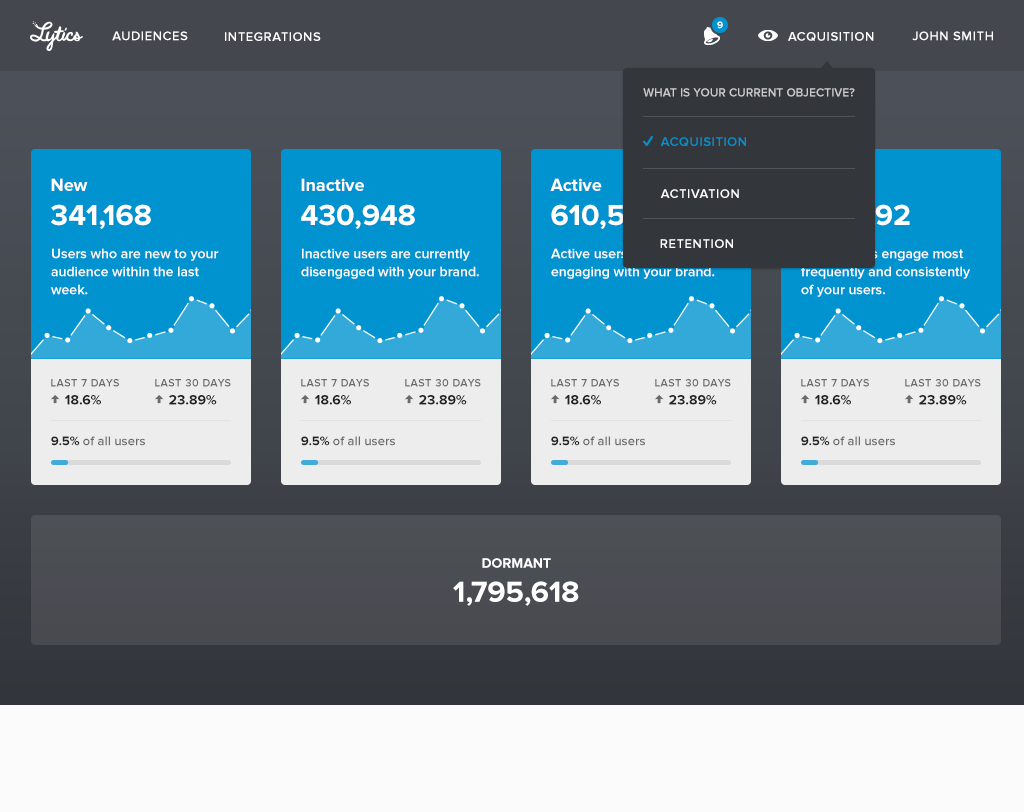
<style>
.page{position:relative;width:1024px;height:812px}
.page>*{position:absolute;margin:0}
.t1{font:10px "ProximaNova-Bold";letter-spacing:0.04em;color:#ffffff;text-transform:uppercase}
.t2{font:13px "ProximaNova-Semibold";letter-spacing:0.04em;color:#ffffff;text-transform:uppercase}
.t3{font:12px "ProximaNova-Semibold";color:#cccccc;text-transform:uppercase}
.t4{font:13px "ProximaNova-Semibold";letter-spacing:0.04em;color:#0093d0;text-transform:uppercase}
.t5{font:30px/34px "ProximaNova-Bold";color:#ffffff}
.t6{font:18px/34px "ProximaNova-Bold";color:#ffffff}
.t7{font:30px/34px "ProximaNova-Bold"}
.t8{font:18px/34px "ProximaNova-Bold"}
.t9{font:14px/18px "ProximaNova-Semibold";color:#ffffff}
.t10{font:11px/18px "ProximaNova-Semibold";letter-spacing:0.04em;color:#6a6a6a;text-transform:uppercase}
.t11{font:14px/18px "ProximaNova-Bold";color:#232323}
.t12{font:13px "ProximaNova-Semibold";color:#6a6a6a}
.t13{font:13px "ProximaNova-Bold";color:#232323}
.t14{font:30px/34px "ProximaNova-Bold";color:#ffffff;text-transform:uppercase}
.t15{font:14px/34px "ProximaNova-Bold";color:#ffffff;text-transform:uppercase}
</style>
<div class="page">
<p class="t1" style="left:717px;top:21px;width:6px;height:8px">9</p>
<p class="t2" style="left:112px;top:31px;width:76px;height:10px">Audiences</p>
<p class="t2" style="left:225px;top:32px;width:96px;height:9px">Integrations</p>
<p class="t2" style="left:788px;top:32px;width:86px;height:9px">Acquisition</p>
<p class="t2" style="left:912px;top:31px;width:81px;height:10px">John SMith</p>
<p class="t3" style="left:643px;top:88px;width:212px;height:9px">What is your current objective?</p>
<p class="t4" style="left:660px;top:137px;width:86px;height:10px">Acquisition</p>
<p class="t5" style="left:51px;top:178px;width:100px;height:51px"><span class="t6">New<br></span>341,168</p>
<p class="t6" style="left:301px;top:178px;width:114px;height:51px">Inactive<br><span class="t5">430,948</span></p>
<p class="t5" style="left:550px;top:178px;width:105px;height:51px"><span class="t6">Active<br></span>610,510</p>
<p class="t7" style="left:801px;top:178px;width:109px;height:51px"><span class="t8">Power<br></span>412,992</p>
<p class="t2" style="left:660px;top:189px;width:79px;height:9px">Activation</p>
<p class="t2" style="left:660px;top:239px;width:73px;height:9px">Retention</p>
<p class="t9" style="left:51px;top:248px;width:168px;height:47px">Users who are new to your <br>audience within the last week.</p>
<p class="t9" style="left:301px;top:248px;width:178px;height:31px">Inactive users are currently <br>disengaged with your brand.</p>
<p class="t9" style="left:551px;top:248px;width:164px;height:31px">Active users are currently <br>engaging with your brand.</p>
<p class="t9" style="left:801px;top:248px;width:169px;height:49px">Power users engage most frequently and consistently of your users.</p>
<p class="t10" style="left:51px;top:379px;width:68px;height:26px">Last 7 days<br><span class="t11">    18.6%</span></p>
<p class="t10" style="left:155px;top:379px;width:76px;height:26px">Last 30 days<br><span class="t11">    23.89%</span></p>
<p class="t10" style="left:301px;top:379px;width:68px;height:26px">Last 7 days<br><span class="t11">    18.6%</span></p>
<p class="t10" style="left:405px;top:379px;width:76px;height:26px">Last 30 days<br><span class="t11">    23.89%</span></p>
<p class="t10" style="left:551px;top:379px;width:68px;height:26px">Last 7 days<br><span class="t11">    18.6%</span></p>
<p class="t10" style="left:655px;top:379px;width:76px;height:26px">Last 30 days<br><span class="t11">    23.89%</span></p>
<p class="t10" style="left:801px;top:379px;width:68px;height:26px">Last 7 days<br><span class="t11">    18.6%</span></p>
<p class="t10" style="left:905px;top:379px;width:76px;height:26px">Last 30 days<br><span class="t11">    23.89%</span></p>
<p class="t12" style="left:51px;top:436px;width:94px;height:10px"><span class="t13">9.5%</span> of all users</p>
<p class="t12" style="left:301px;top:436px;width:94px;height:10px"><span class="t13">9.5%</span> of all users</p>
<p class="t12" style="left:551px;top:436px;width:94px;height:10px"><span class="t13">9.5%</span> of all users</p>
<p class="t12" style="left:801px;top:436px;width:94px;height:10px"><span class="t13">9.5%</span> of all users</p>
<p class="t14" style="left:453px;top:558px;width:126px;height:48px;text-align:center"><span class="t15">Dormant<br></span>1,795,618</p>
</div>
